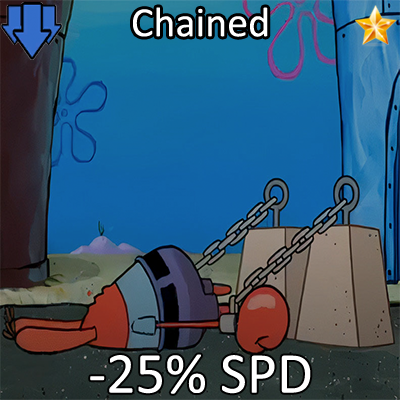
<style>
.page{position:relative;width:400px;height:400px}
.page>*{position:absolute;margin:0}
.t1{font:72px "Calibri";color:#ffffff}
.t2{font:100px "Calibri";color:#ffffff}
</style>
<div class="page">
<p class="t1" style="left:133px;top:7px;width:135px;height:30px">Chained</p>
<p class="t2" style="left:90px;top:354px;width:221px;height:40px">-25% SPD</p>
</div>
